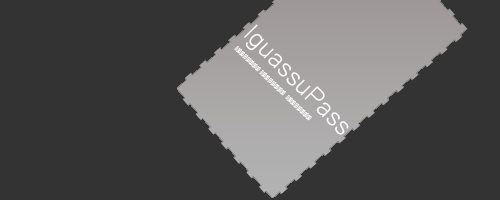
<style>
.page{position:relative;width:500px;height:200px;background:#333333}
.page>*{position:absolute;margin:0}
.t1{font:33.3px "Microsoft-Yi-Baiti";color:#ffffff}
.t2{font:12.3px "Microsoft-Yi-Baiti";color:#ffffff;scale:0.43 1}
</style>
<div class="page">
<p class="t1" style="left:244px;top:24px;width:105px;height:111px;rotate:46deg">IguassuPass</p>
<p class="t2" style="left:234px;top:46px;width:27px;height:26px;rotate:44deg">aaaaaaaaaaaaaaa</p>
<p class="t2" style="left:259px;top:70px;width:27px;height:26px;rotate:44deg">aaaaaaaaaaaaaaa</p>
<p class="t2" style="left:285px;top:95px;width:27px;height:26px;rotate:44deg">aaaaaaaaaaaaaaa</p>
</div>
